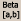
<style>
.page{position:relative;width:21px;height:21px;background:#d9cdc1}
.page>*{position:absolute;margin:0}
.t1{font:8px "Tahoma";color:#000000}
</style>
<div class="page">
<p class="t1" style="left:3px;top:1px;width:17px;height:18px">Beta<br>[a,b]</p>
</div>
